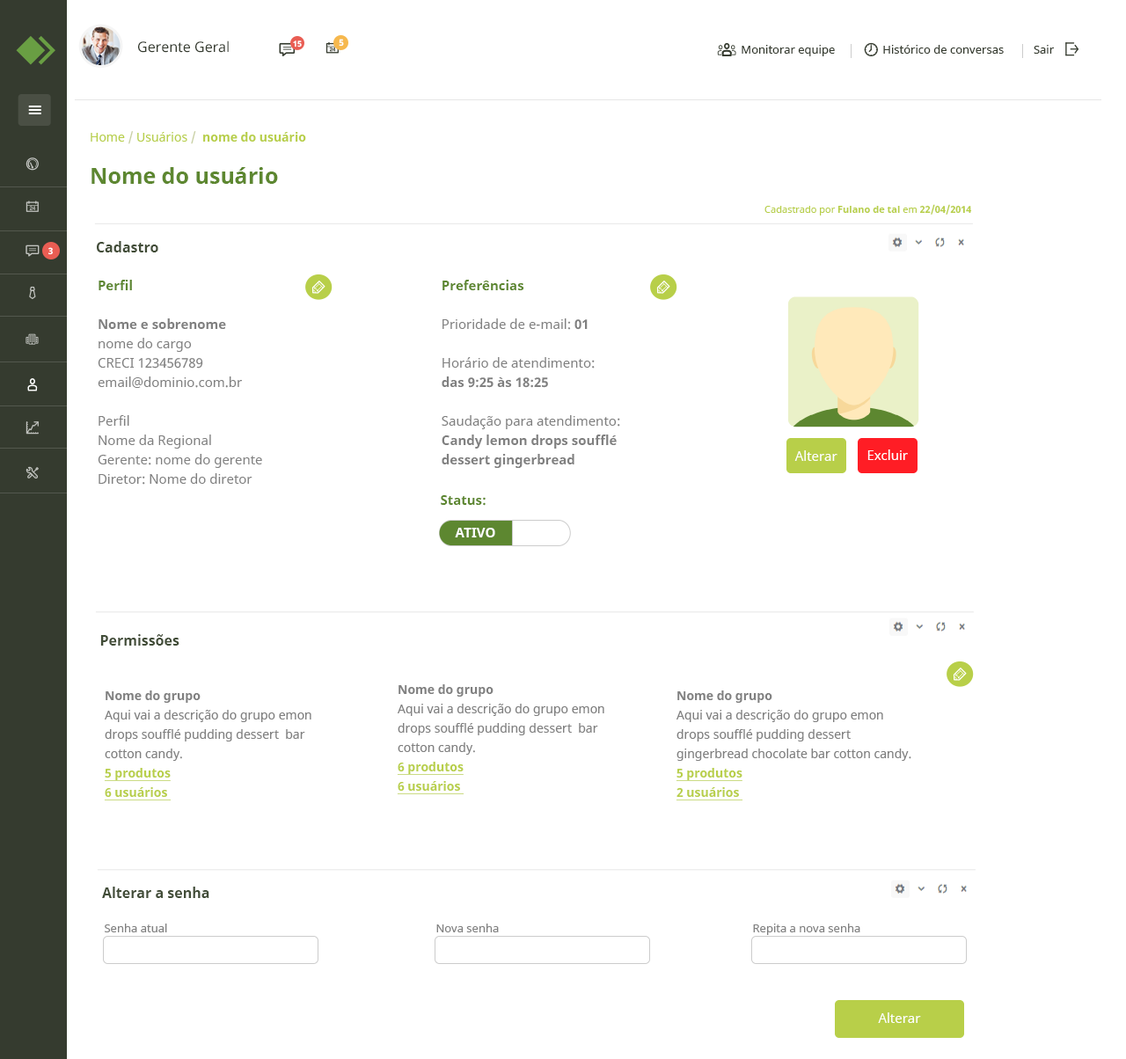
<style>
.page{position:relative;width:1126px;height:1059px;background:#ffffff}
.page>*{position:absolute;margin:0}
.t1{font:14.1px "NotoSans";color:#353b2f}
.t2{font:7.9px "NotoSans-Bold";color:#ffffff}
.t3{font:8.8px "NotoSans-Bold";color:#ffffff}
.t4{font:11.4px "NotoSans";color:#353b2f}
.t5{font:12.3px "NotoSans-Bold";color:#b8cf49}
.t6{font:12.3px "NotoSans";color:#b8cf49}
.t7{font:12.3px "NotoSans";color:#c7cfa1}
.t8{font:22px "NotoSans-Bold";color:#5d8730}
.t9{font:9.7px "NotoSans";color:#b8cf49}
.t10{font:9.7px "NotoSans-Bold";color:#b8cf49}
.t11{font:14.1px "NotoSans-Bold";color:#424d38}
.t12{font:13.2px/19.4px "NotoSans";color:#808080}
.t13{font:13.2px/19.4px "NotoSans-Bold";color:#5d8730}
.t14{font:13.2px/19.4px "NotoSans-Bold";color:#808080}
.t15{font:13.2px "NotoSans";color:#ffffff}
.t16{font:13.2px "NotoSans-Bold";color:#5d8730}
.t17{font:13.2px "NotoSans-Bold";color:#ffffff}
.t18{font:12.3px/19.4px "NotoSans";color:#808080}
.t19{font:12.3px/35.2px "NotoSans-Bold";color:#808080}
.t20{font:12.3px/19.4px "NotoSans-Bold";color:#b8cf49;text-decoration:underline}
.t21{font:11.4px "NotoSans";color:#808080}
</style>
<div class="page">
<p class="t1" style="left:138px;top:40px;width:91px;height:13px">Gerente Geral</p>
<p class="t2" style="left:293px;top:40px;width:9px;height:7px">15</p>
<p class="t3" style="left:339px;top:39px;width:5px;height:8px">5</p>
<p class="t4" style="left:742px;top:45px;width:312px;height:11px">Monitorar equipe                Histórico de conversas          Sair</p>
<p class="t5" style="left:91px;top:131px;width:215px;height:13px"><span class="t6">Home </span><span class="t7">/</span><span class="t6"> Usuários </span><span class="t7">/  </span>nome do usuário</p>
<p class="t8" style="left:91px;top:167px;width:187px;height:17px">Nome do usuário</p>
<p class="t9" style="left:764px;top:204px;width:208px;height:12px">Cadastrado por<span class="t10"> Fulano de tal </span>em<span class="t10"> 22/04/2014</span></p>
<p class="t11" style="left:97px;top:241px;width:61px;height:11px">Cadastro</p>
<p class="t3" style="left:48px;top:247px;width:5px;height:8px">3</p>
<p class="t12" style="left:98px;top:280px;width:164px;height:205px"><span class="t13">Perfil<br><br></span><span class="t14">Nome e sobrenome<br></span>nome do cargo<br>CRECI 123456789<br>email@dominio.com.br<br><br>Perfil<br>Nome da Regional<br>Gerente: nome do gerente<br>Diretor: Nome do diretor</p>
<p class="t14" style="left:442px;top:280px;width:178px;height:188px"><span class="t13">Preferências<br></span><span class="t12"><br>Prioridade de e-mail: </span>01<br><span class="t12"><br>Horário de atendimento:<br></span>das 9:25 às 18:25<br><span class="t12"><br>Saudação para atendimento:<br></span>Candy lemon drops soufflé dessert gingerbread</p>
<p class="t15" style="left:867px;top:449px;width:41px;height:11px">Excluir</p>
<p class="t15" style="left:794px;top:450px;width:43px;height:11px">Alterar</p>
<p class="t16" style="left:441px;top:495px;width:45px;height:11px">Status:</p>
<p class="t17" style="left:455px;top:528px;width:40px;height:9px">ATIVO</p>
<p class="t11" style="left:100px;top:634px;width:79px;height:12px">Permissões</p>
<p class="t18" style="left:397px;top:684px;width:207px;height:110px"><span class="t19">Nome do grupo<br></span>Aqui vai a descrição do grupo emon drops soufflé pudding dessert  bar cotton candy.<br><span class="t20">6 produtos<br>6 usuários</span></p>
<p class="t18" style="left:104px;top:691px;width:207px;height:109px"><span class="t19">Nome do grupo<br></span>Aqui vai a descrição do grupo emon drops soufflé pudding dessert  bar cotton candy.<br><span class="t20">5 produtos<br>6 usuários</span></p>
<p class="t18" style="left:676px;top:691px;width:235px;height:109px"><span class="t19">Nome do grupo<br></span>Aqui vai a descrição do grupo emon drops soufflé pudding dessert gingerbread chocolate bar cotton candy.<br><span class="t20">5 produtos<br>2 usuários</span></p>
<p class="t11" style="left:102px;top:887px;width:107px;height:11px">Alterar a senha</p>
<p class="t21" style="left:105px;top:924px;width:62px;height:8px">Senha atual</p>
<p class="t21" style="left:436px;top:924px;width:63px;height:8px">Nova senha</p>
<p class="t21" style="left:753px;top:924px;width:107px;height:11px">Repita a nova senha</p>
<p class="t15" style="left:878px;top:1012px;width:43px;height:11px">Alterar</p>
</div>
